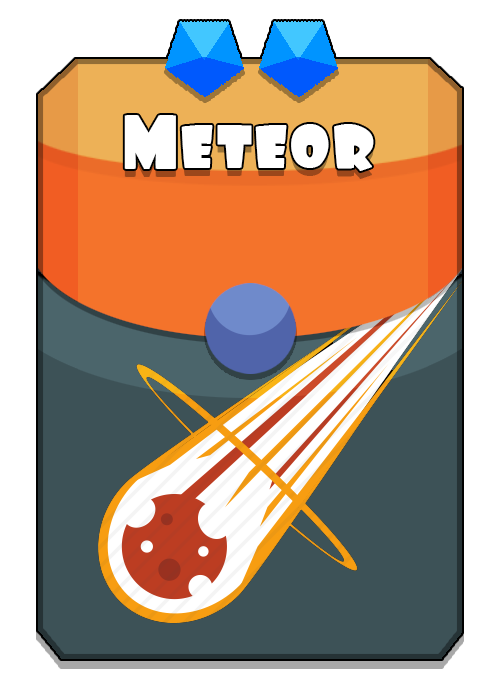
<style>
.page{position:relative;width:500px;height:698px;background:#ffffff}
.page>*{position:absolute;margin:0}
.t1{font:69px "Foo";color:#ffffff}
</style>
<div class="page">
<p class="t1" style="left:124px;top:115px;width:250px;height:56px">Meteor</p>
</div>
